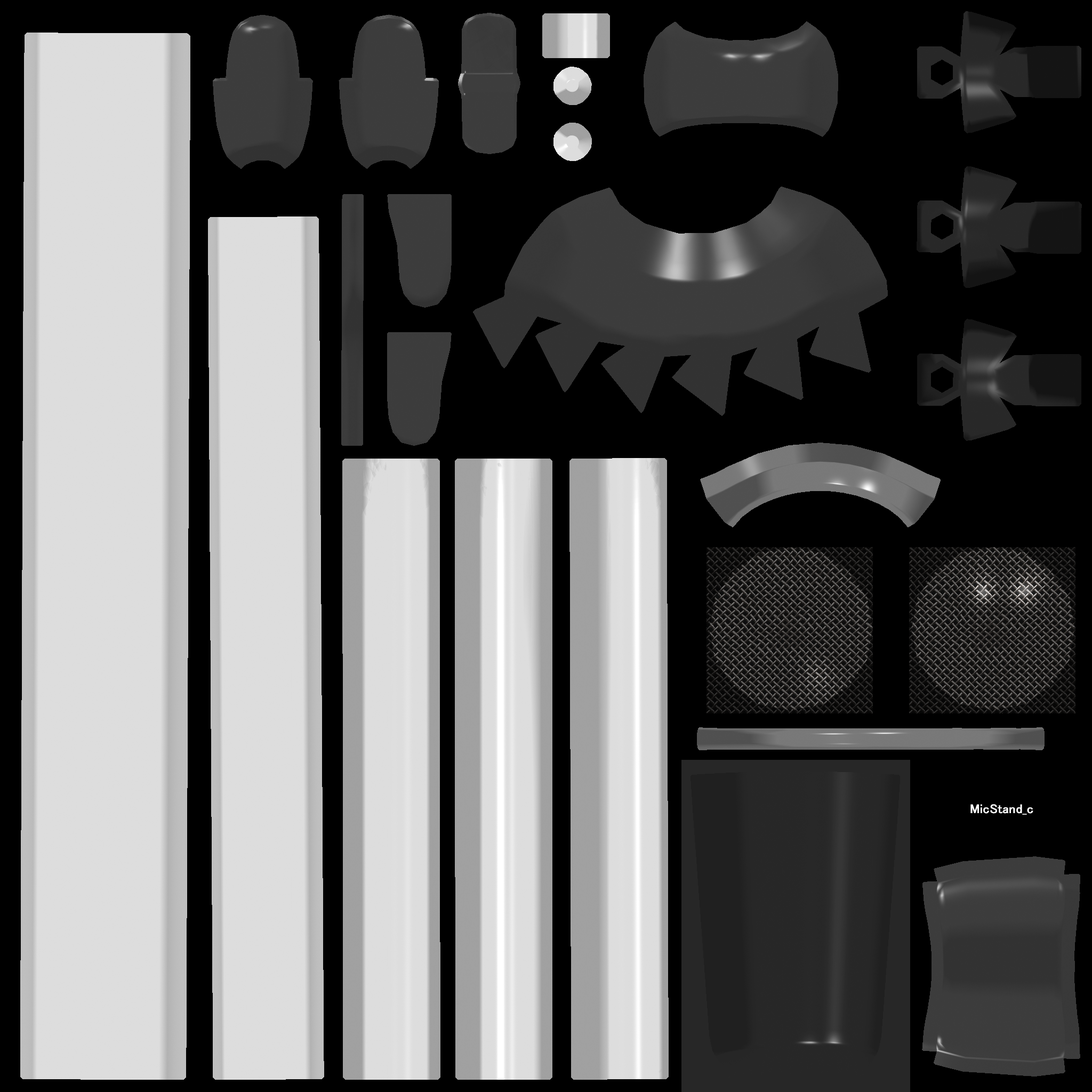
<style>
.page{position:relative;width:1092px;height:1092px;background:#000000}
.page>*{position:absolute;margin:0}
.t1{font:12.8px "MS-PGothic";color:#ffffff;font-weight:bold}
</style>
<div class="page">
<p class="t1" style="left:970px;top:804px;width:63px;height:11px">MicStand_c</p>
</div>
